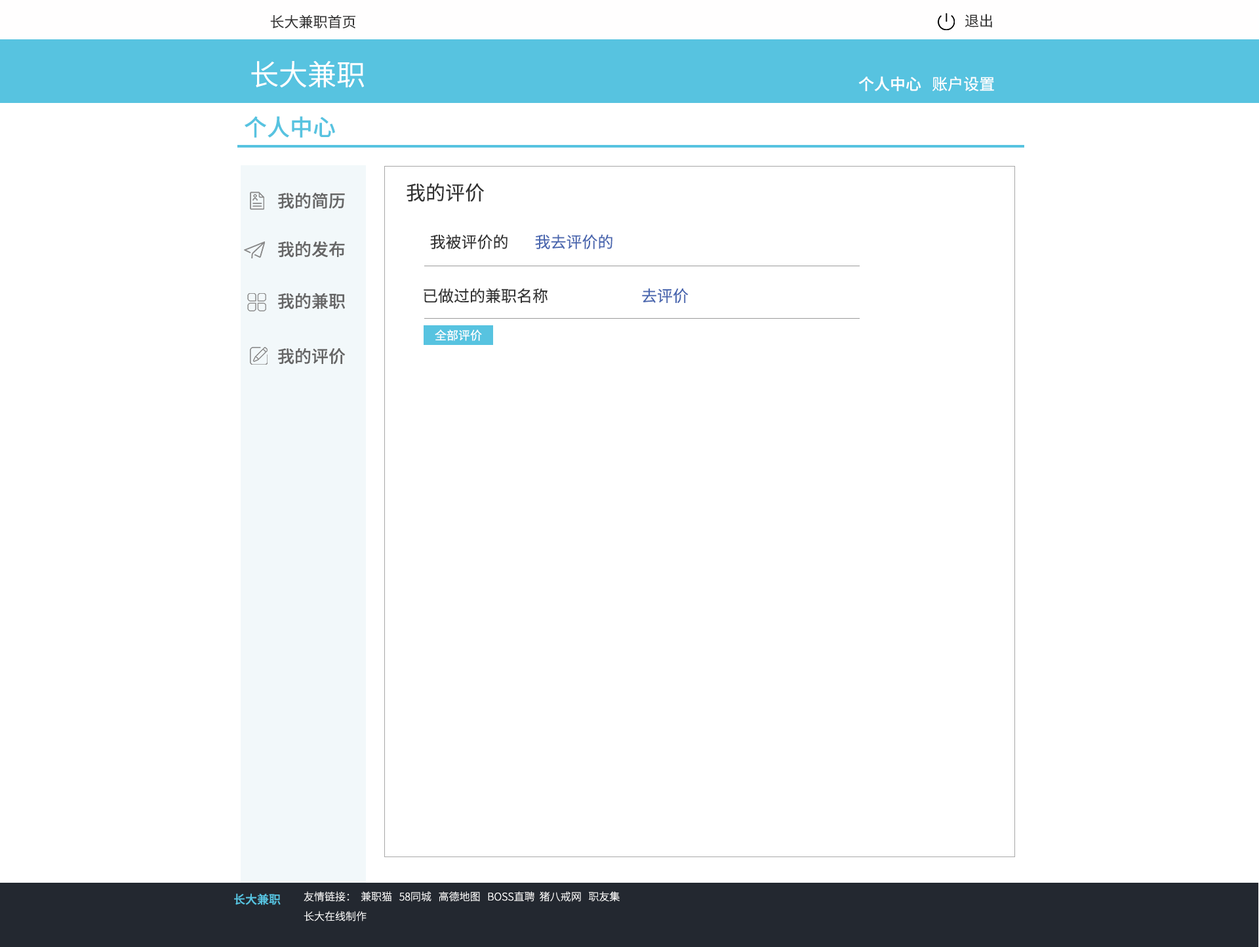
<style>
.page{position:relative;width:1259px;height:947px;background:#ffffff}
.page>*{position:absolute;margin:0}
.t1{font:14.4px "SourceHanSansCN-Normal";color:#333333}
.t2{font:28.9px "SourceHanSansCN-Normal";color:#ffffff}
.t3{font:15.7px "SourceHanSansCN-Medium";color:#ffffff}
.t4{font:15.7px "SourceHanSansCN-Regular";color:#ffffff}
.t5{font:23px "SourceHanSansCN-Medium";color:#57c3e0}
.t6{font:19.7px "SourceHanSansCN-Regular";color:#333333}
.t7{font:17.1px "SourceHanSansCN-Medium";color:#666666}
.t8{font:15.7px "SourceHanSansCN-Regular";color:#333333}
.t9{font:15.7px "SourceHanSansCN-Regular";color:#4a67af}
.t10{font:11.8px "SourceHanSansCN-Regular";color:#ffffff}
.t11{font:11.8px "SourceHanSansCN-Medium";color:#57c3e0}
.t12{font:10.5px "SourceHanSansCN-Light";color:#ffffff}
</style>
<div class="page">
<p class="t1" style="left:270px;top:15px;width:85px;height:14px">长大兼职首页</p>
<p class="t1" style="left:965px;top:14px;width:27px;height:14px">退出</p>
<p class="t2" style="left:251px;top:61px;width:113px;height:27px">长大兼职</p>
<p class="t3" style="left:858px;top:76px;width:136px;height:15px">个人中心<span class="t4">   账户设置</span></p>
<p class="t5" style="left:245px;top:116px;width:90px;height:22px">个人中心</p>
<p class="t6" style="left:407px;top:183px;width:78px;height:19px">我的评价</p>
<p class="t7" style="left:278px;top:192px;width:67px;height:17px">我的简历</p>
<p class="t7" style="left:278px;top:241px;width:67px;height:17px">我的发布</p>
<p class="t8" style="left:430px;top:234px;width:78px;height:15px">我被评价的</p>
<p class="t9" style="left:535px;top:234px;width:78px;height:15px">我去评价的</p>
<p class="t7" style="left:278px;top:292px;width:67px;height:18px">我的兼职</p>
<p class="t8" style="left:424px;top:288px;width:124px;height:15px">已做过的兼职名称</p>
<p class="t9" style="left:642px;top:288px;width:47px;height:16px">去评价</p>
<p class="t10" style="left:435px;top:329px;width:47px;height:12px">全部评价</p>
<p class="t7" style="left:278px;top:348px;width:68px;height:17px">我的评价</p>
<p class="t11" style="left:234px;top:893px;width:47px;height:12px">长大兼职</p>
<p class="t12" style="left:304px;top:891px;width:316px;height:11px">友情链接：  兼职猫   58同城   高德地图   BOSS直聘  猪八戒网   职友集</p>
<p class="t12" style="left:304px;top:911px;width:63px;height:10px">长大在线制作</p>
</div>
